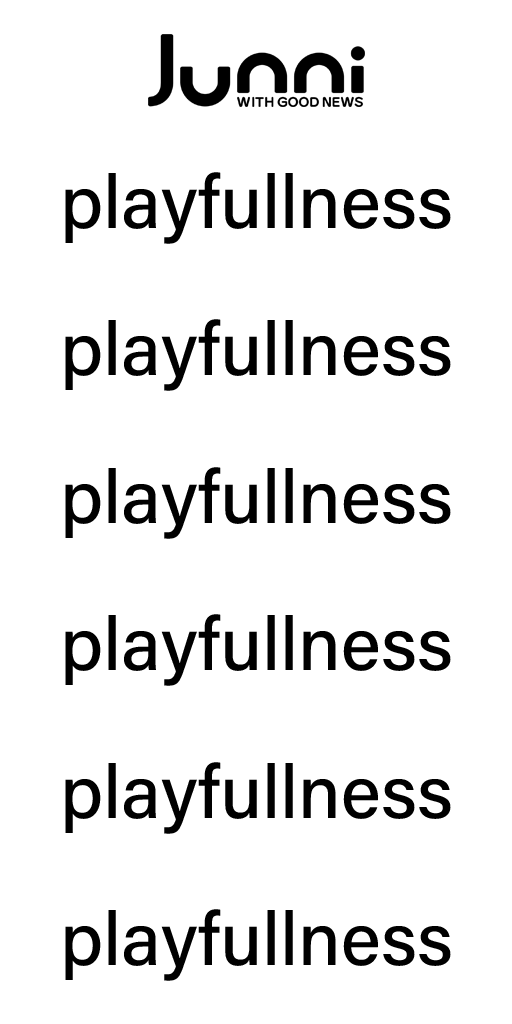
<style>
.page{position:relative;width:512px;height:1024px;background:#ffffff}
.page>*{position:absolute;margin:0}
.t1{font:75px "AcuminConcept-Medium";color:#000000}
</style>
<div class="page">
<p class="t1" style="left:65px;top:172px;width:386px;height:72px">playfullness</p>
<p class="t1" style="left:65px;top:319px;width:386px;height:72px">playfullness</p>
<p class="t1" style="left:65px;top:467px;width:386px;height:72px">playfullness</p>
<p class="t1" style="left:65px;top:614px;width:386px;height:72px">playfullness</p>
<p class="t1" style="left:65px;top:762px;width:386px;height:72px">playfullness</p>
<p class="t1" style="left:65px;top:909px;width:386px;height:72px">playfullness</p>
</div>
